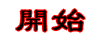
<style>
.page{position:relative;width:105px;height:40px;background:#ffffff}
.page>*{position:absolute;margin:0}
.t1{font:36px "LiSu";color:#000000}
</style>
<div class="page">
<p class="t1" style="left:16px;top:9px;width:69px;height:23px">開始</p>
</div>
